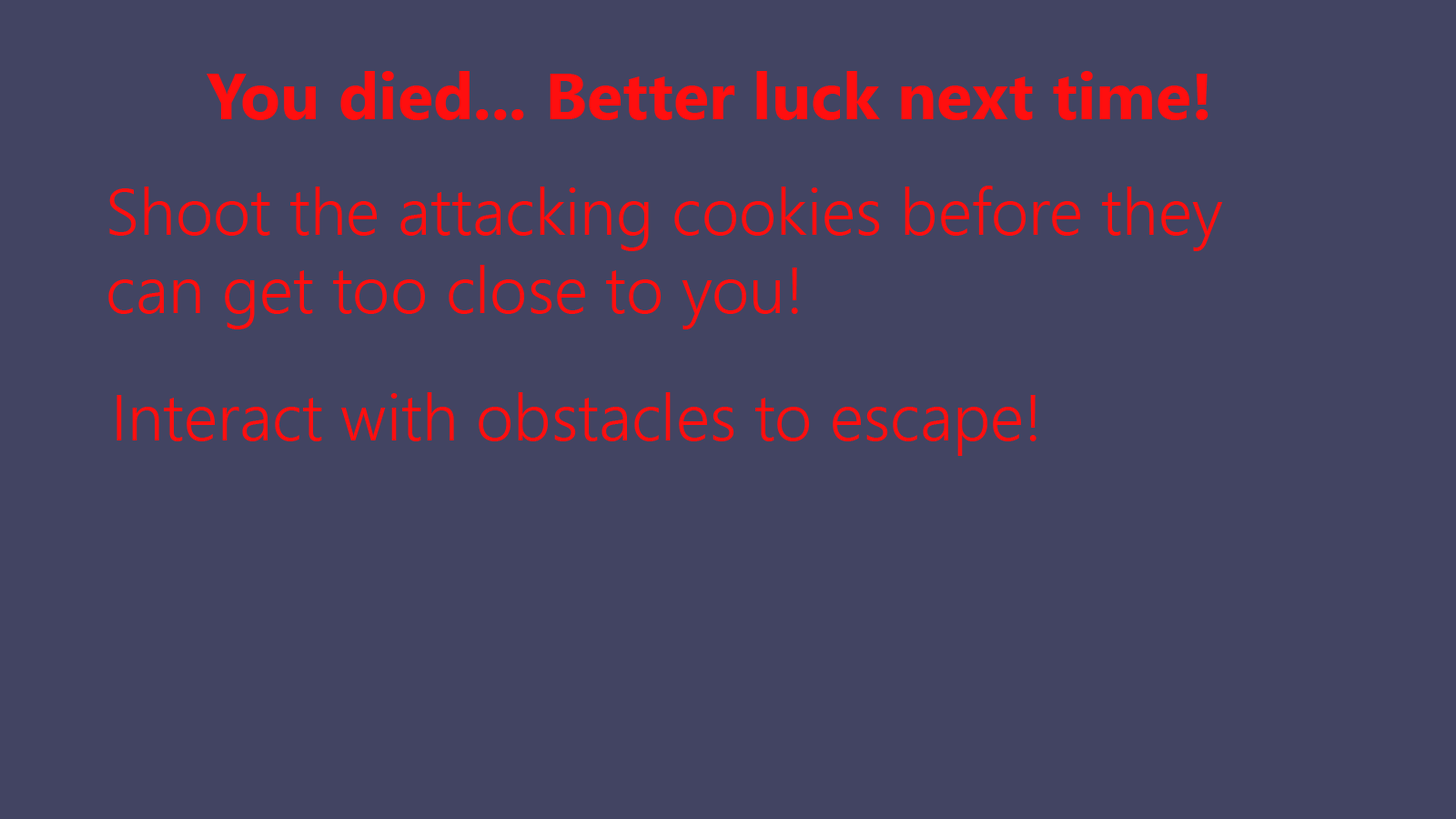
<style>
.page{position:relative;width:1456px;height:819px;background:#424462}
.page>*{position:absolute;margin:0}
.t1{font:65.5px "SegoeUI-Bold";color:#ff0f0f}
.t2{font:65.5px "SegoeUI-Semilight";color:#ff0f0f}
</style>
<div class="page">
<p class="t1" style="left:207px;top:71px;width:1001px;height:49px">You died... Better luck next time!</p>
<p class="t2" style="left:108px;top:186px;width:1115px;height:143px">Shoot the attacking cookies before they <br>can get too close to you!</p>
<p class="t2" style="left:116px;top:392px;width:920px;height:64px">Interact with obstacles to escape!</p>
</div>
